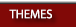
<style>
.page{position:relative;width:76px;height:27px;background:#810907}
.page>*{position:absolute;margin:0}
.t1{font:12.5px "MyriadPro-Regular";color:#ffffff}
</style>
<div class="page">
<p class="t1" style="left:9px;top:9px;width:43px;height:10px">THEMES</p>
</div>
